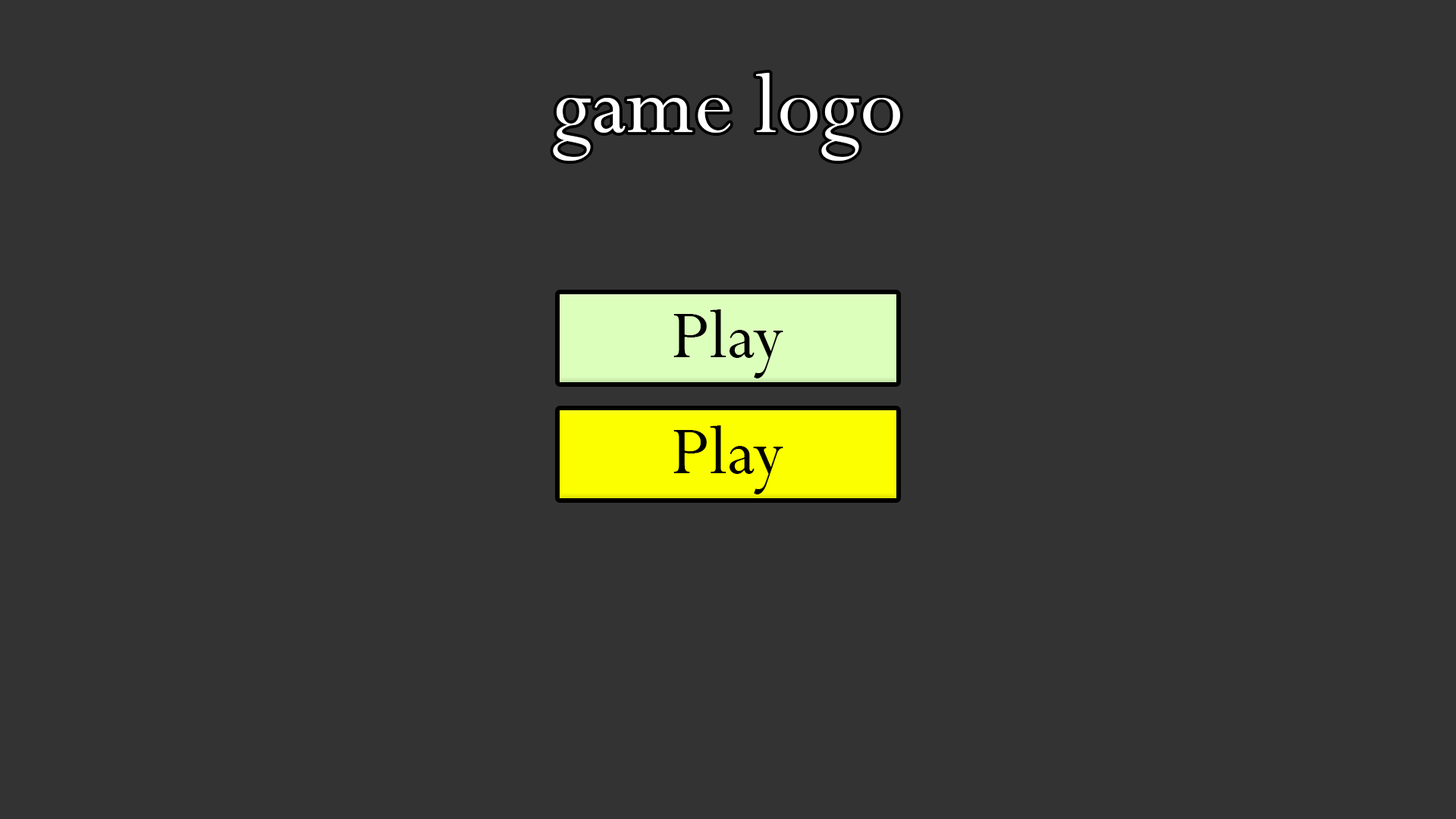
<style>
.page{position:relative;width:1456px;height:819px;background:#333333}
.page>*{position:absolute;margin:0}
.t1{font:94.8px "Perpetua";color:#ffffff}
.t2{font:75.8px "Perpetua";color:#000000}
</style>
<div class="page">
<p class="t1" style="left:553px;top:73px;width:347px;height:88px">game logo</p>
<p class="t2" style="left:673px;top:309px;width:110px;height:69px">Play</p>
<p class="t2" style="left:673px;top:425px;width:110px;height:69px">Play</p>
</div>
